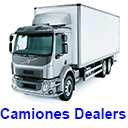
<style>
.page{position:relative;width:128px;height:128px;background:#ffffff}
.page>*{position:absolute;margin:0}
.t1{font:14.5px "Arial-BoldMT";color:#070cf5}
.t2{font:15px "Arial-BoldMT";color:#070cf5}
</style>
<div class="page">
<p class="t1" style="left:0px;top:108px;width:126px;height:11px">Cami<span class="t2">ones </span>Dealers</p>
</div>
